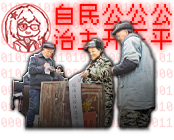
<style>
.page{position:relative;width:174px;height:140px}
.page>*{position:absolute;margin:0}
.t1{font:24.6px/24.3px "HYPixel-11px-U";color:#ff0501}
</style>
<div class="page">
<p class="t1" style="left:53px;top:3px;width:119px;height:47px">公平<br>公正<br>公开<br>民主<br>自治</p>
</div>
